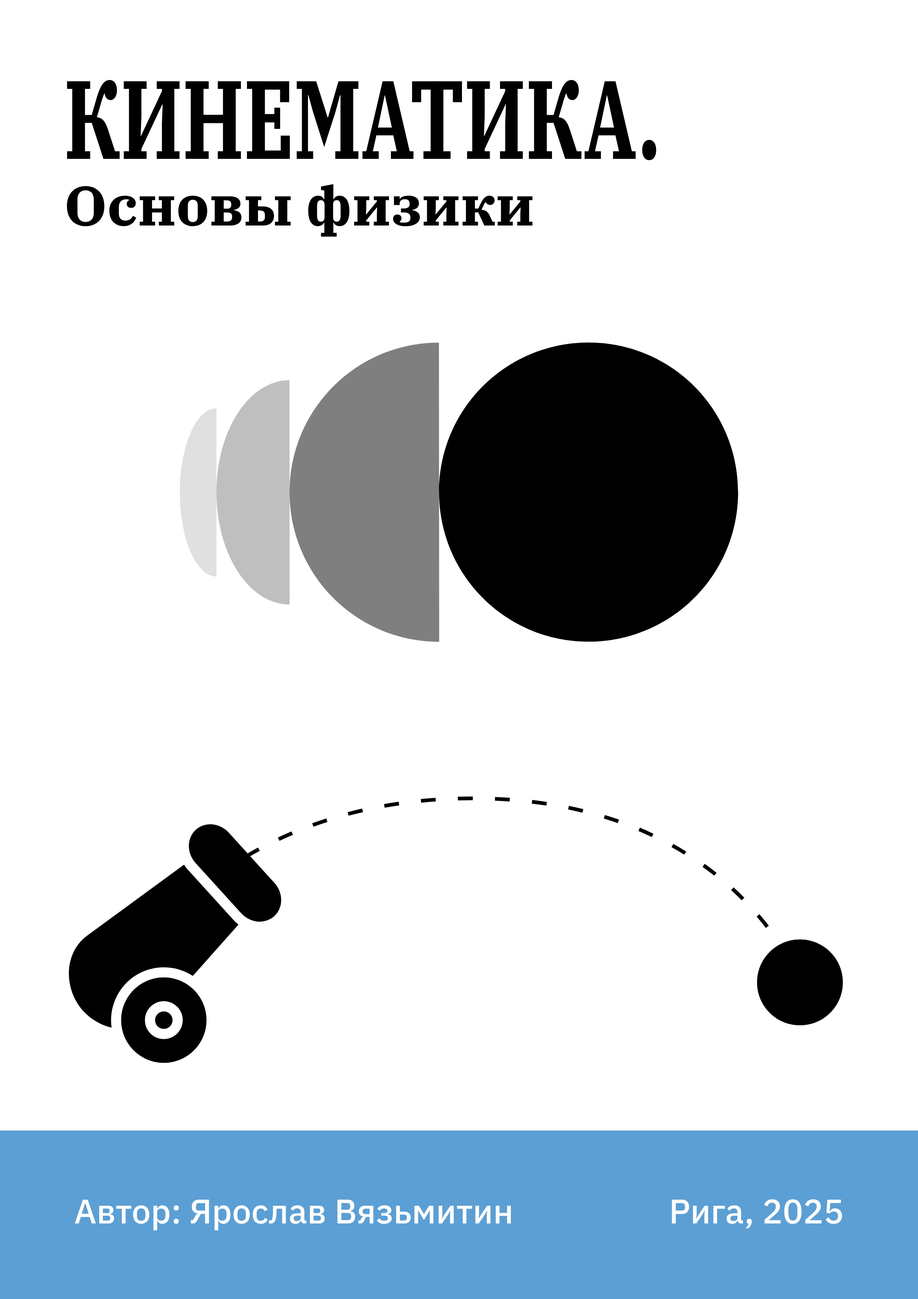
<style>
.page{position:relative;width:918px;height:1299px;background:#ffffff}
.page>*{position:absolute;margin:0}
.t1{font:55.5px "IBMPlexSerif-Bold";color:#000000}
.t2{font:111.1px "IBMPlexSerif-Bold";color:#000000;scale:0.67 1}
.t3{font:34.1px "IBMPlexSans-Medium";color:#ffffff}
</style>
<div class="page">
<p class="t1" style="left:67px;top:80px;width:589px;height:157px"><span class="t2">КИНЕМАТИКА.<br></span>Основы физики</p>
<p class="t3" style="left:75px;top:1199px;width:767px;height:31px">Автор: Ярослав Вязьмитин<br>Рига, 2025</p>
</div>
